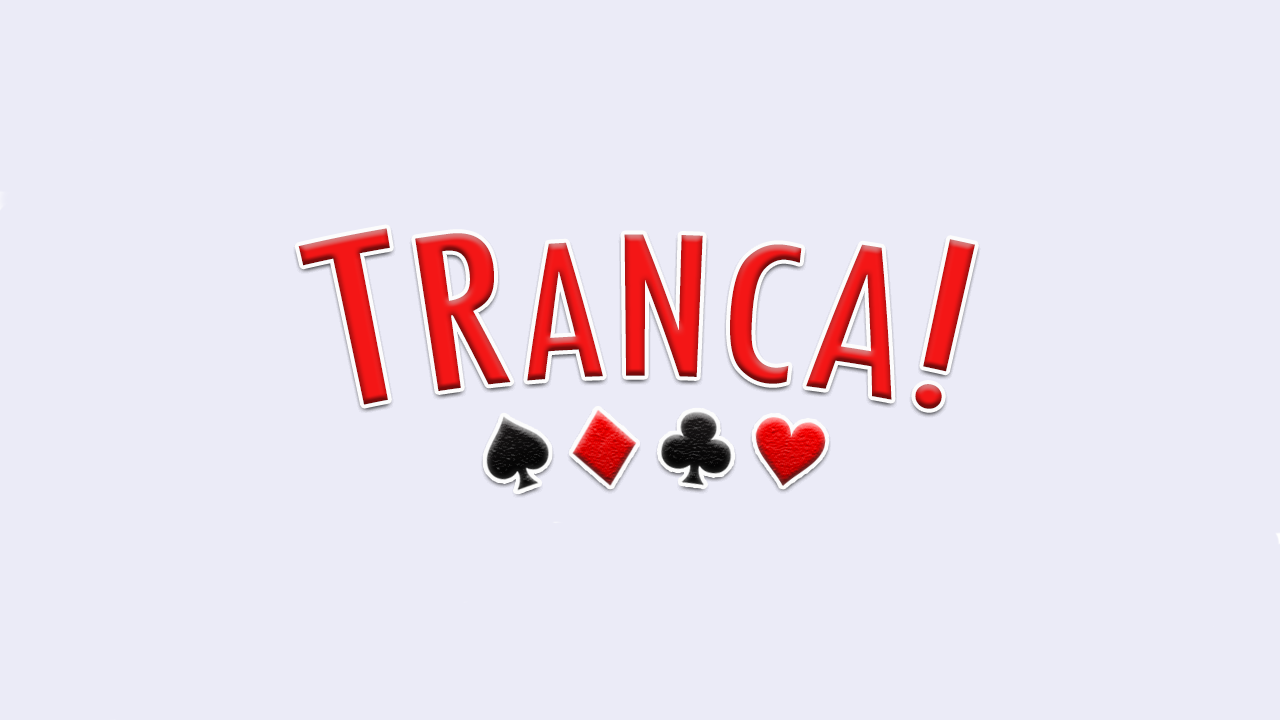
<style>
.page{position:relative;width:1280px;height:720px;background:#ebebf7}
.page>*{position:absolute;margin:0}
.t1{font:270.3px "TwCenMT-Condensed";color:#f41616}
.t2{font:248.7px "TwCenMT-Condensed";color:#f41616}
.t3{font:216.2px "TwCenMT-Condensed";color:#f41616}
.t4{font:227.1px "TwCenMT-Condensed";color:#f41616}
.t5{font:237.9px "TwCenMT-Condensed";color:#f41616}
</style>
<div class="page">
<p class="t1" style="left:298px;top:228px;width:677px;height:181px">T<span class="t2">R</span><span class="t3">A</span><span class="t4">N</span><span class="t3">C</span><span class="t5">A</span>!</p>
</div>
